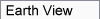
<style>
.page{position:relative;width:100px;height:19px;background:#fafafa}
.page>*{position:absolute;margin:0}
.t1{font:14px "ArialMT";color:#000000}
</style>
<div class="page">
<p class="t1" style="left:6px;top:5px;width:67px;height:11px">Earth View</p>
</div>
